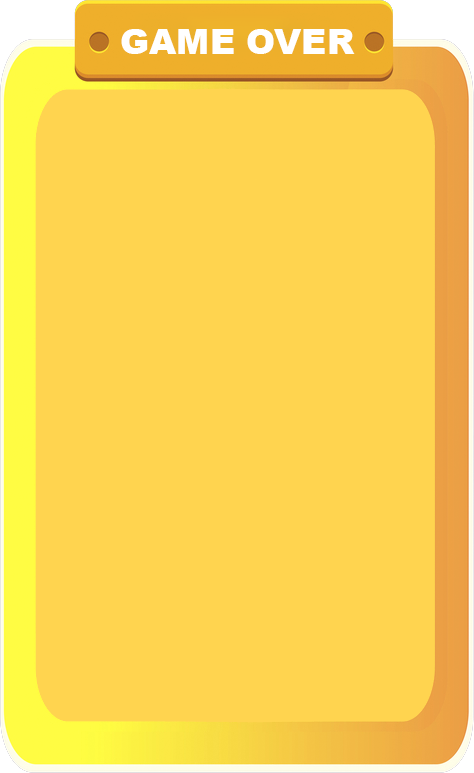
<style>
.page{position:relative;width:474px;height:773px;background:#ffd44f}
.page>*{position:absolute;margin:0}
.t1{font:35px "Arial-Black";color:#ffffff}
</style>
<div class="page">
<p class="t1" style="left:121px;top:29px;width:234px;height:25px">GAME OVER</p>
</div>
